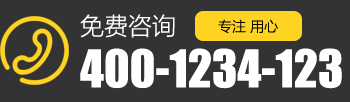
<style>
.page{position:relative;width:350px;height:102px;background:#333333}
.page>*{position:absolute;margin:0}
.t1{font:24px "MicrosoftYaHeiLight";color:#ffffff}
.t2{font:14px "MicrosoftYaHeiLight";color:#000000}
.t3{font:48px "Impact";color:#ffffff}
</style>
<div class="page">
<p class="t1" style="left:80px;top:14px;width:95px;height:24px">免费咨询</p>
<p class="t2" style="left:218px;top:19px;width:60px;height:15px">专注 用心</p>
<p class="t3" style="left:80px;top:48px;width:262px;height:41px">400-1234-123</p>
</div>
